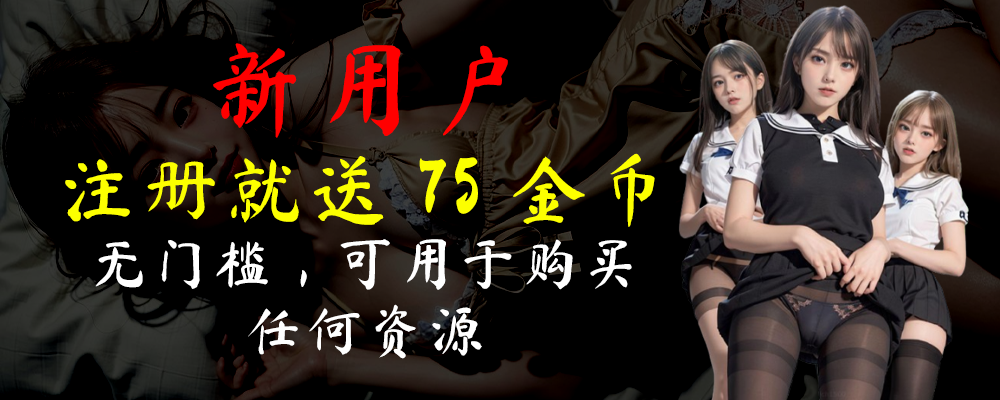
<style>
.page{position:relative;width:1000px;height:400px;background:#000000}
.page>*{position:absolute;margin:0}
.t1{font:55.9px "MaShanZheng-Regular";letter-spacing:0.1em;color:#ffffff}
.t2{font:100.3px "MaShanZheng-Regular";letter-spacing:0.1em;color:#ff0000}
.t3{font:76.1px "MaShanZheng-Regular";letter-spacing:0.1em;color:#fcff00}
</style>
<div class="page">
<p class="t1" style="left:65px;top:43px;width:590px;height:316px;text-align:center"><span class="t2">新用户<br></span><span class="t3">注册就送 75 金币<br></span>无门槛，可用于购买<br>任何资源</p>
</div>
